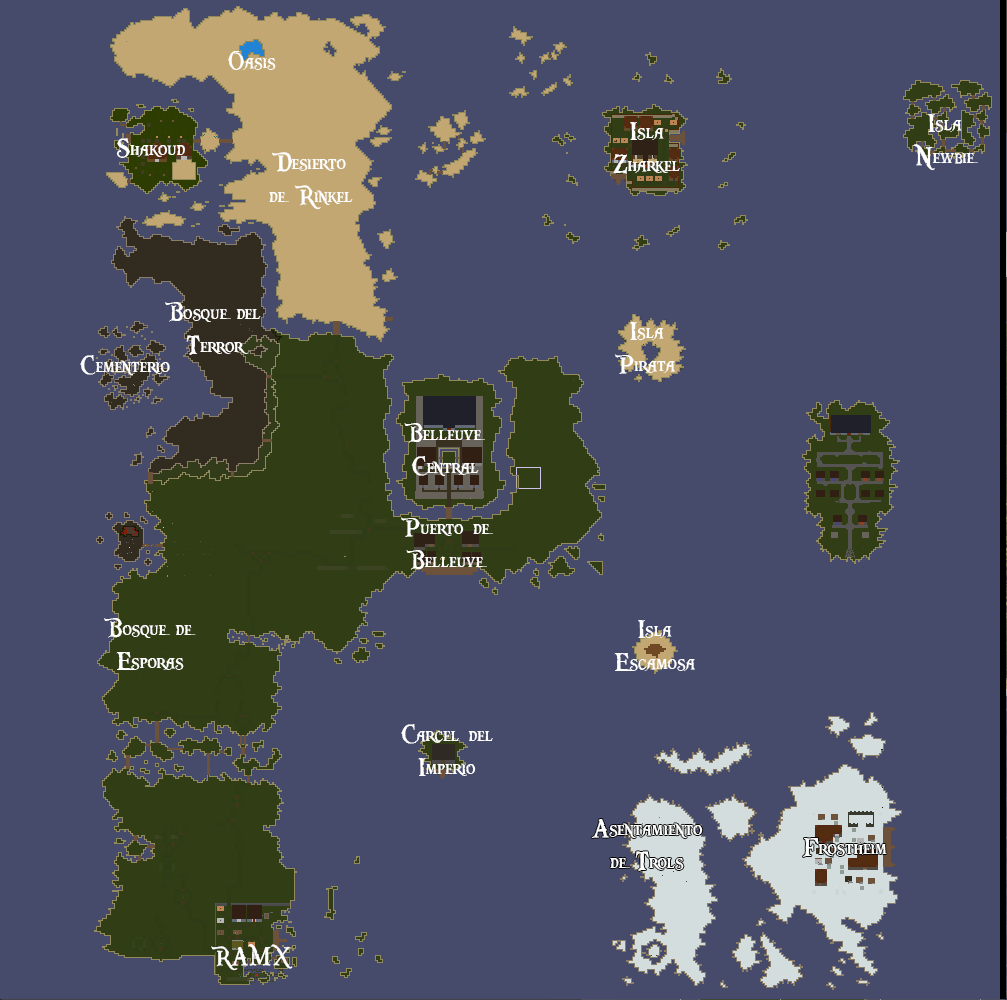
<style>
.page{position:relative;width:1007px;height:1000px;background:#464b6c}
.page>*{position:absolute;margin:0}
.t1{font:28px "PiecesofEight";letter-spacing:-0.01em;color:#ffffff;scale:0.9 1}
</style>
<div class="page">
<p class="t1" style="left:228px;top:51px;width:48px;height:19px">Oasis</p>
<p class="t1" style="left:613px;top:122px;width:67px;height:52px;text-align:center">Isla<br>Zharkel</p>
<p class="t1" style="left:913px;top:114px;width:65px;height:57px;text-align:center">Isla<br>Newbie</p>
<p class="t1" style="left:116px;top:138px;width:69px;height:20px">Shakoud</p>
<p class="t1" style="left:269px;top:152px;width:84px;height:58px;text-align:center">Desierto<br>de Rinkel</p>
<p class="t1" style="left:165px;top:302px;width:96px;height:53px;text-align:center">Bosque del<br>Terror</p>
<p class="t1" style="left:614px;top:322px;width:61px;height:52px;text-align:center">Isla<br>Pirata</p>
<p class="t1" style="left:80px;top:355px;width:90px;height:21px">Cementerio</p>
<p class="t1" style="left:404px;top:423px;width:81px;height:54px;text-align:center">Belleuve<br>Central</p>
<p class="t1" style="left:401px;top:517px;width:92px;height:53px;text-align:center">Puerto de<br>Belleuve</p>
<p class="t1" style="left:104px;top:618px;width:92px;height:52px;text-align:center">Bosque de<br>Esporas</p>
<p class="t1" style="left:614px;top:620px;width:81px;height:51px;text-align:center">Isla<br>Escamosa</p>
<p class="t1" style="left:401px;top:724px;width:92px;height:52px;text-align:center">Carcel del<br>Imperio</p>
<p class="t1" style="left:591px;top:819px;width:112px;height:52px;text-align:center">Asentamiento<br>de Trols</p>
<p class="t1" style="left:803px;top:838px;width:84px;height:19px">Frostheim</p>
<p class="t1" style="left:211px;top:943px;width:82px;height:28px">RAMX</p>
</div>
